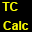
<style>
.page{position:relative;width:32px;height:32px;background:#000000}
.page>*{position:absolute;margin:0}
.t1{font:12px "Arial-BoldMT";color:#f7fa04}
</style>
<div class="page">
<p class="t1" style="left:2px;top:2px;width:16px;height:9px">TC</p>
<p class="t1" style="left:3px;top:21px;width:26px;height:9px">Calc</p>
</div>
